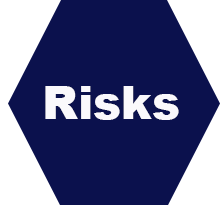
<style>
.page{position:relative;width:224px;height:205px;background:#0b114d}
.page>*{position:absolute;margin:0}
.t1{font:45.8px "Arial-Black";color:#faf9fc}
</style>
<div class="page">
<p class="t1" style="left:45px;top:86px;width:134px;height:34px">Risks</p>
</div>
